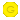
<style>
.page{position:relative;width:20px;height:20px;background:#ffffff}
.page>*{position:absolute;margin:0}
.t1{font:10px "CenturyGothic";color:#d1c501}
</style>
<div class="page">
<p class="t1" style="left:6px;top:6px;width:9px;height:7px">G</p>
</div>
